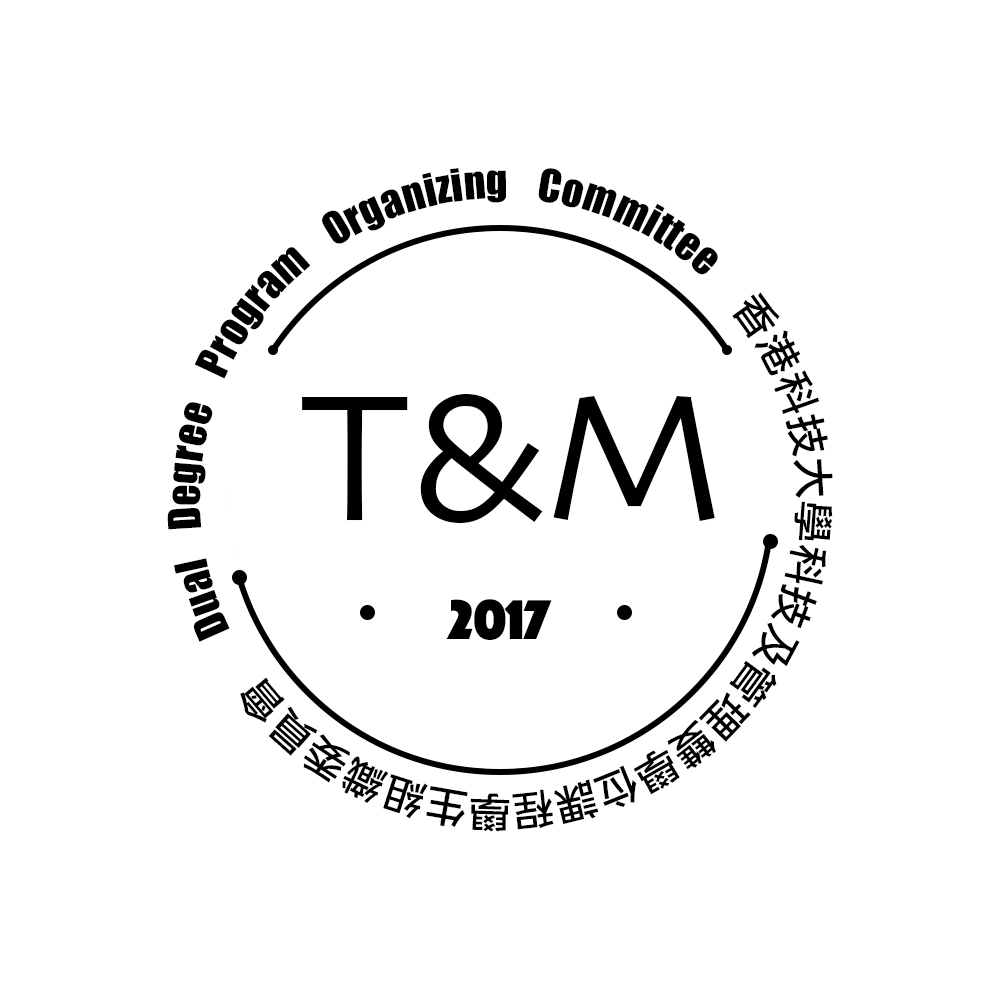
<style>
.page{position:relative;width:1000px;height:1000px;background:#ffffff}
.page>*{position:absolute;margin:0}
.t1{font:41.7px "Impact";color:#000000}
.t2{font:41.7px "LiGothicMed";color:#000000}
.t3{font:187.5px "Skia-Regular";color:#000000}
.t4{font:58.3px "Phosphate-Solid";color:#000000}
</style>
<div class="page">
<p class="t1" style="left:167px;top:168px;width:666px;height:664px;text-align:justify"><span class="t2"> </span>Dual Degree Program Organizing Committee <span class="t2">香港科技大學科技及管理雙學位課程學生組織委員會</span></p>
<p class="t3" style="left:302px;top:394px;width:413px;height:129px">T&amp;M</p>
<p class="t4" style="left:446px;top:599px;width:106px;height:41px">2017</p>
</div>
